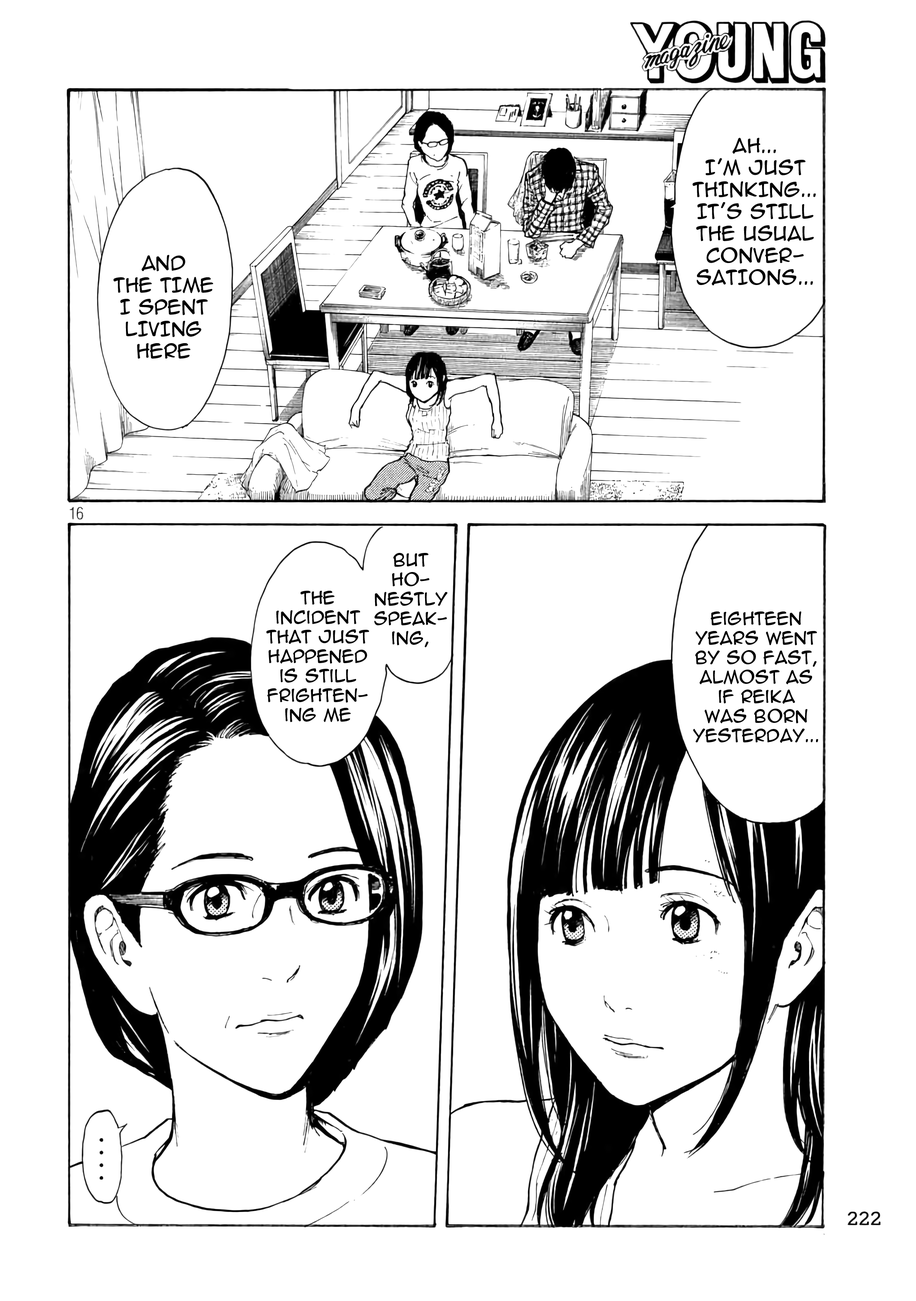
<style>
.page{position:relative;width:916px;height:1301px;background:#ffffff}
.page>*{position:absolute;margin:0}
.t1{font:18.3px "AnimeAce2.0BB";color:#000000;text-transform:uppercase}
.t2{font:16.3px "AnimeAce2.0BB";color:#000000}
</style>
<div class="page">
<p class="t1" style="left:693px;top:138px;width:123px;height:147px;text-align:center">Ah... <br>I’m just thinking... it’s still the usual conver-<br>sations...</p>
<p class="t1" style="left:113px;top:255px;width:100px;height:104px;text-align:center">and <br>the time <br>I spent living here</p>
<p class="t2" style="left:374px;top:553px;width:74px;height:94px;text-align:center">But <br>ho-<br>nestly speak-<br>ing,</p>
<p class="t2" style="left:266px;top:591px;width:104px;height:131px;text-align:center">the incident that just happened is still frighten-<br>ing me</p>
<p class="t2" style="left:693px;top:612px;width:126px;height:131px;text-align:center">Eighteen years went by so fast, almost as <br>if Reika <br>was born yesterday...</p>
</div>
